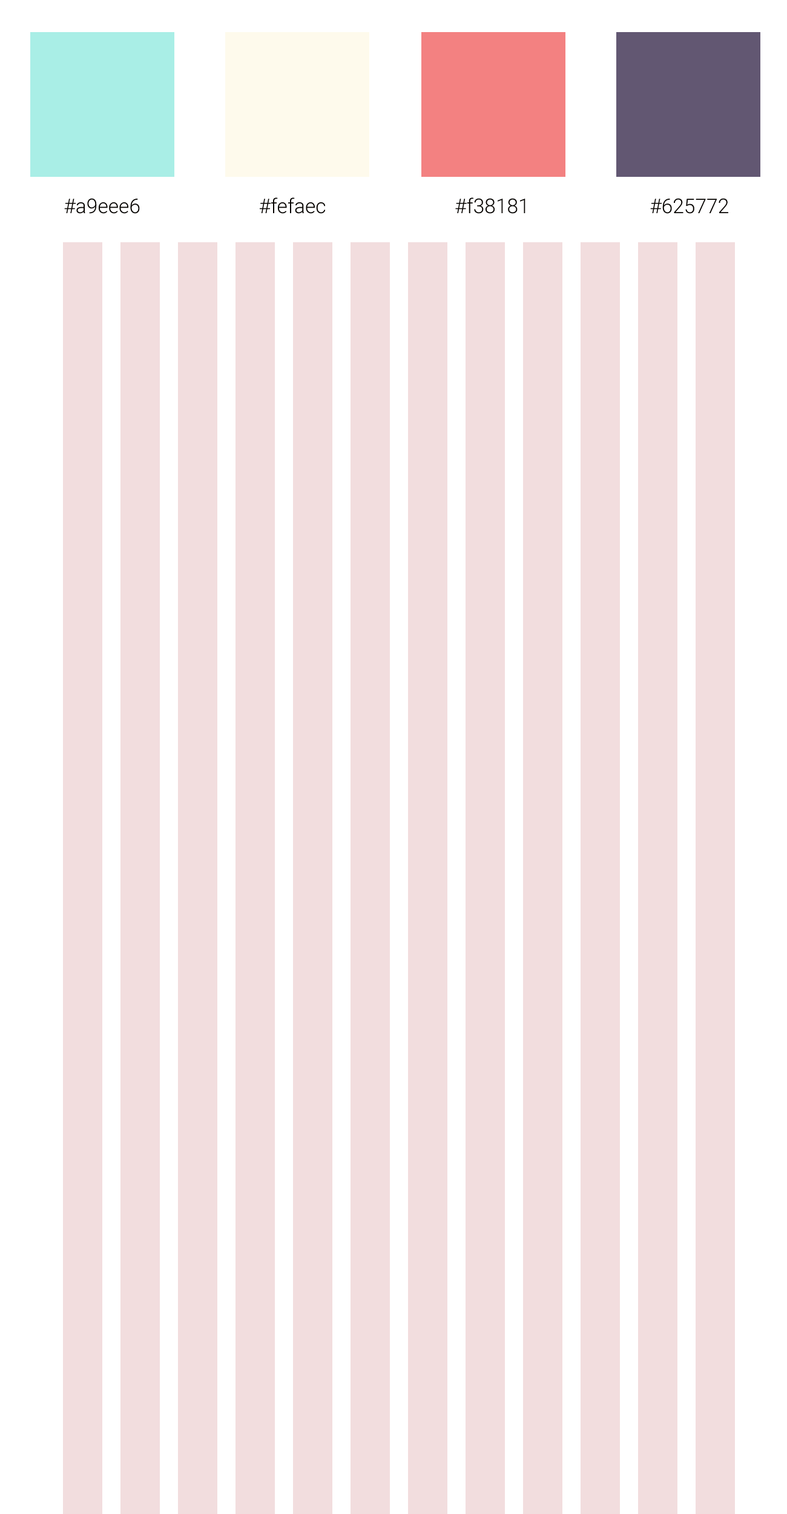
<style>
.page{position:relative;width:787px;height:1514px;background:#f2ddde}
.page>*{position:absolute;margin:0}
.t1{font:20.3px "Roboto-Light";color:#060300}
</style>
<div class="page">
<p class="t1" style="left:260px;top:197px;width:66px;height:17px">#fefaec</p>
<p class="t1" style="left:456px;top:197px;width:70px;height:17px">#f38181</p>
<p class="t1" style="left:64px;top:198px;width:76px;height:16px">#a9eee6</p>
<p class="t1" style="left:651px;top:198px;width:78px;height:16px">#625772</p>
</div>
